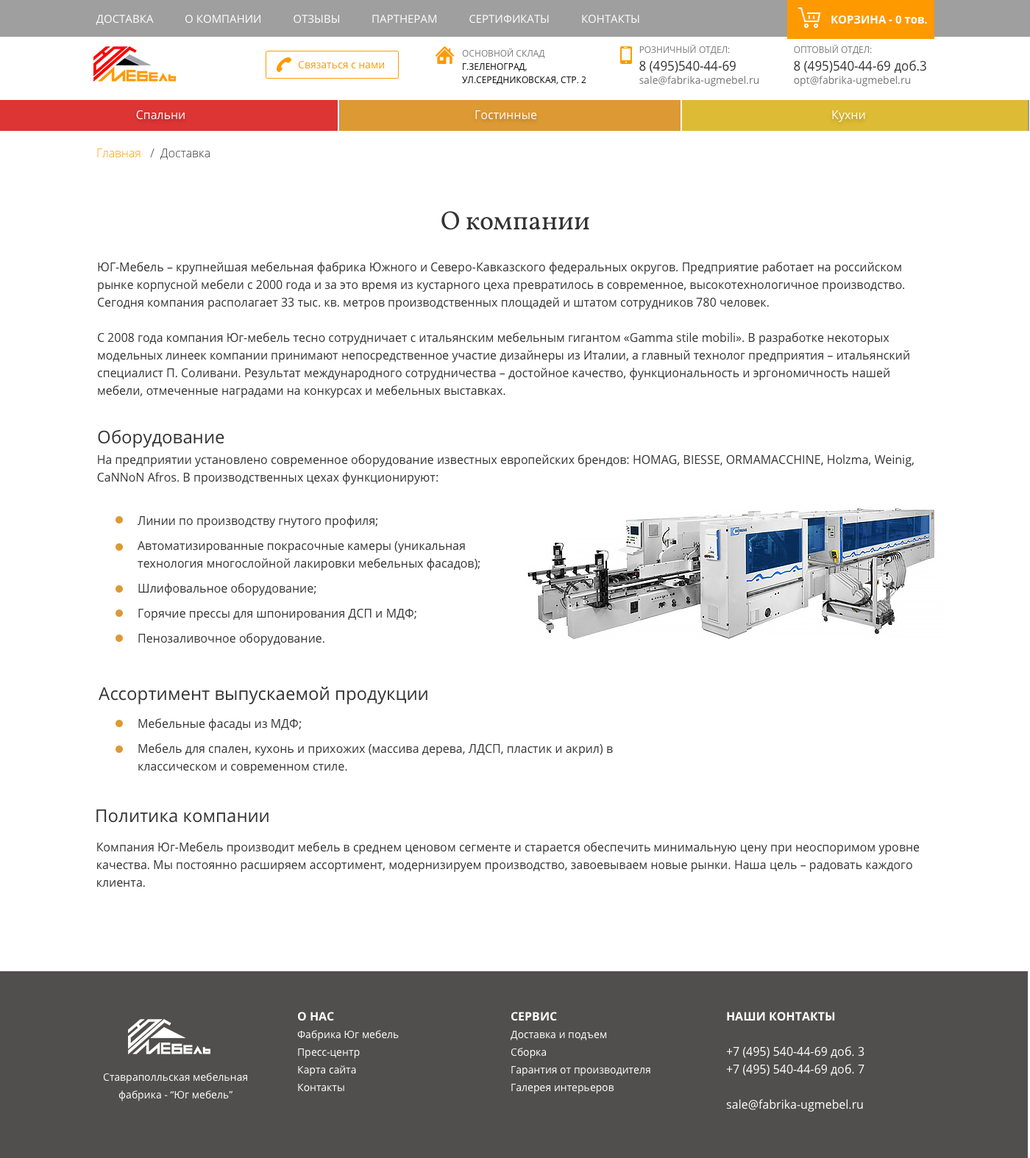
<style>
.page{position:relative;width:1030px;height:1158px;background:#ffffff}
.page>*{position:absolute;margin:0}
.t1{font:11px "OpenSans";color:#ffffff;text-transform:uppercase}
.t2{font:11px "OpenSans-Bold";color:#ffffff;text-transform:uppercase}
.t3{font:11px "OpenSans-Bold";color:#ffffff}
.t4{font:8.8px/13.2px "OpenSans";color:#000000;text-transform:uppercase}
.t5{font:8.8px/13.2px "OpenSans";color:#777777;text-transform:uppercase}
.t6{font:10.3px/13.2px "OpenSans";color:#777777}
.t7{font:12.5px/17.6px "OpenSans";color:#333333}
.t8{font:10.3px "OpenSans";color:#ff9900}
.t9{font:11.8px "OpenSans";color:#ffffff}
.t10{font:11.8px "OpenSans-Light";color:#333333}
.t11{font:11.8px "OpenSans-Light";color:#ff9900}
.t12{font:26.5px "Vollkorn-Regular";color:#333333}
.t13{font:11.8px/17.6px "OpenSans";color:#333333}
.t14{font:17.6px "OpenSans";color:#333333}
.t15{font:10.3px/17.6px "OpenSans";color:#ffffff}
.t16{font:11.8px/17.6px "OpenSans-Bold";color:#ffffff;text-transform:uppercase}
.t17{font:11.8px/17.6px "OpenSans";color:#ffffff}
</style>
<div class="page">
<p class="t1" style="left:96px;top:15px;width:543px;height:10px">Доставка           О компании           Отзывы           Партнерам           Сертификаты           Контакты</p>
<p class="t2" style="left:831px;top:15px;width:96px;height:9px">Корзина - 0 <span class="t3">тов.</span></p>
<p class="t4" style="left:462px;top:48px;width:124px;height:37px"><span class="t5">Основной склад<br></span>г.Зеленоград, ул.Середниковская, стр. 2</p>
<p class="t6" style="left:639px;top:44px;width:120px;height:43px"><span class="t5">Розничный отдел:<br></span><span class="t7">8 (495)540-44-69<br></span>sale@fabrika-ugmebel.ru</p>
<p class="t7" style="left:793px;top:44px;width:133px;height:43px"><span class="t5">Оптовый отдел:<br></span>8 (495)540-44-69 доб.3<br><span class="t6">opt@fabrika-ugmebel.ru</span></p>
<p class="t8" style="left:298px;top:60px;width:86px;height:9px">Связаться с нами</p>
<p class="t9" style="left:136px;top:110px;width:49px;height:10px">Спальни</p>
<p class="t9" style="left:475px;top:110px;width:62px;height:10px">Гостинные</p>
<p class="t9" style="left:832px;top:110px;width:33px;height:12px">Кухни</p>
<p class="t10" style="left:97px;top:149px;width:113px;height:11px"><span class="t11">Главная</span>   /  Доставка</p>
<p class="t12" style="left:441px;top:211px;width:148px;height:19px">О компании</p>
<p class="t13" style="left:97px;top:262px;width:812px;height:136px">ЮГ-Мебель – крупнейшая мебельная фабрика Южного и Северо-Кавказского федеральных округов. Предприятие работает на российском рынке корпусной мебели с 2000 года и за это время из кустарного цеха превратилось в современное, высокотехнологичное производство. Сегодня компания располагает 33 тыс. кв. метров производственных площадей и штатом сотрудников 780 человек.<br><br>С 2008 года компания Юг-мебель тесно сотрудничает с итальянским мебельным гигантом «Gamma stile mobili». В разработке некоторых модельных линеек компании принимают непосредственное участие дизайнеры из Италии, а главный технолог предприятия – итальянский специалист П. Соливани. Результат международного сотрудничества – достойное качество, функциональность и эргономичность нашей мебели, отмеченные наградами на конкурсах и мебельных выставках.</p>
<p class="t14" style="left:98px;top:429px;width:126px;height:19px">Оборудование</p>
<p class="t13" style="left:97px;top:454px;width:816px;height:31px">На предприятии установлено современное оборудование известных европейских брендов: HOMAG, BIESSE, ORMAMACCHINE, Holzma, Weinig, CaNNoN Afros. В производственных цехах функционируют:</p>
<p class="t13" style="left:138px;top:516px;width:341px;height:130px">Линии по производству гнутого профиля;<br>Автоматизированные покрасочные камеры (уникальная технология многослойной лакировки мебельных фасадов);<br>Шлифовальное оборудование; <br>Горячие прессы для шпонирования ДСП и МДФ;<br>Пенозаливочное оборудование.</p>
<p class="t14" style="left:99px;top:686px;width:328px;height:18px">Ассортимент выпускаемой продукции</p>
<p class="t13" style="left:138px;top:718px;width:475px;height:56px">Мебельные фасады из МДФ;<br>Мебель для спален, кухонь и прихожих (массива дерева, ЛДСП, пластик и акрил) в классическом и современном стиле.</p>
<p class="t14" style="left:96px;top:809px;width:172px;height:14px">Политика компании</p>
<p class="t13" style="left:97px;top:842px;width:822px;height:46px">Компания Юг-Мебель производит мебель в среднем ценовом сегменте и старается обеспечить минимальную цену при неоспоримом уровне качества. Мы постоянно расширяем ассортимент, модернизируем производство, завоевываем новые рынки. Наша цель – радовать каждого клиента.</p>
<p class="t15" style="left:297px;top:1012px;width:102px;height:80px"><span class="t16">О нас<br></span>Фабрика Юг мебель<br>Пресс-центр<br>Карта сайта<br>Контакты</p>
<p class="t15" style="left:510px;top:1012px;width:140px;height:82px"><span class="t16">Сервис<br></span>Доставка и подъем<br>Сборка<br>Гарантия от производителя<br>Галерея интерьеров</p>
<p class="t17" style="left:726px;top:1012px;width:138px;height:100px"><span class="t16">Наши контакты<br><br></span>+7 (495) 540-44-69 доб. 3<br>+7 (495) 540-44-69 доб. 7<br><br>sale@fabrika-ugmebel.ru</p>
<p class="t15" style="left:103px;top:1073px;width:144px;height:29px;text-align:center">Ставраполльская мебельная фабрика - “Юг мебель”</p>
</div>
